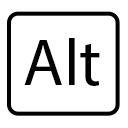
<style>
.page{position:relative;width:128px;height:128px;background:#ffffff}
.page>*{position:absolute;margin:0}
.t1{font:66.7px "MyriadPro-Regular";color:#000000}
</style>
<div class="page">
<p class="t1" style="left:24px;top:38px;width:76px;height:48px">Alt</p>
</div>
